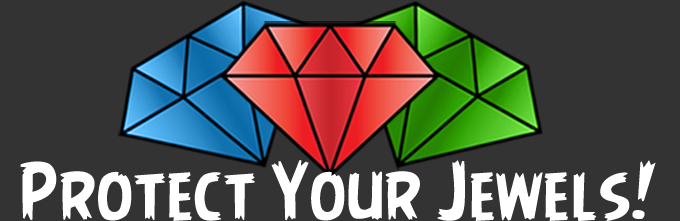
<style>
.page{position:relative;width:680px;height:221px;background:#333333}
.page>*{position:absolute;margin:0}
.t1{font:73px "AngryBirds-Regular";color:#ffffff}
</style>
<div class="page">
<p class="t1" style="left:20px;top:160px;width:636px;height:61px">Protect Your Jewels!</p>
</div>
